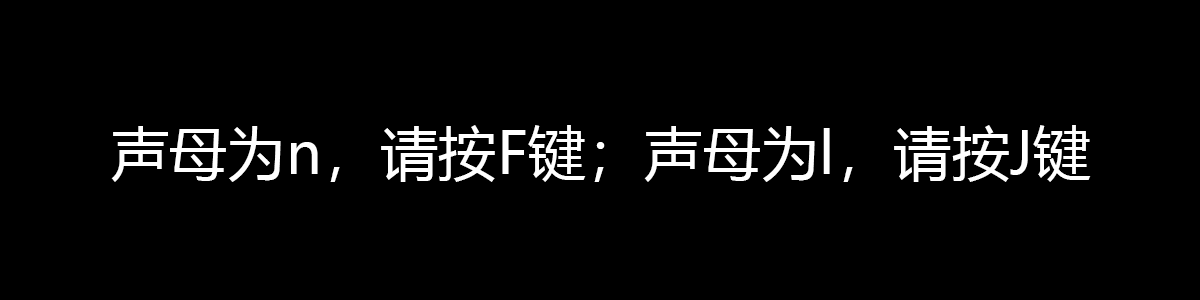
<style>
.page{position:relative;width:1200px;height:300px;background:#000000}
.page>*{position:absolute;margin:0}
.t1{font:58.3px "MicrosoftYaHei";color:#ffffff}
</style>
<div class="page">
<p class="t1" style="left:111px;top:125px;width:980px;height:57px">声母为n，请按F键；声母为l，请按J键</p>
</div>
